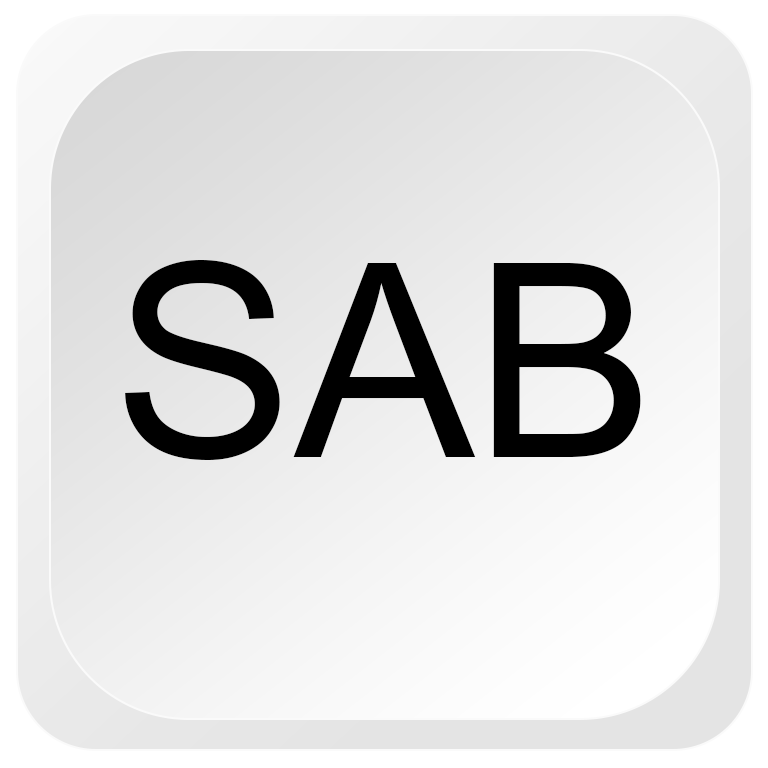
<style>
.page{position:relative;width:768px;height:768px}
.page>*{position:absolute;margin:0}
.t1{font:271px "ArialMT";color:#000000}
</style>
<div class="page">
<p class="t1" style="left:125px;top:260px;width:516px;height:200px">SAB</p>
</div>
